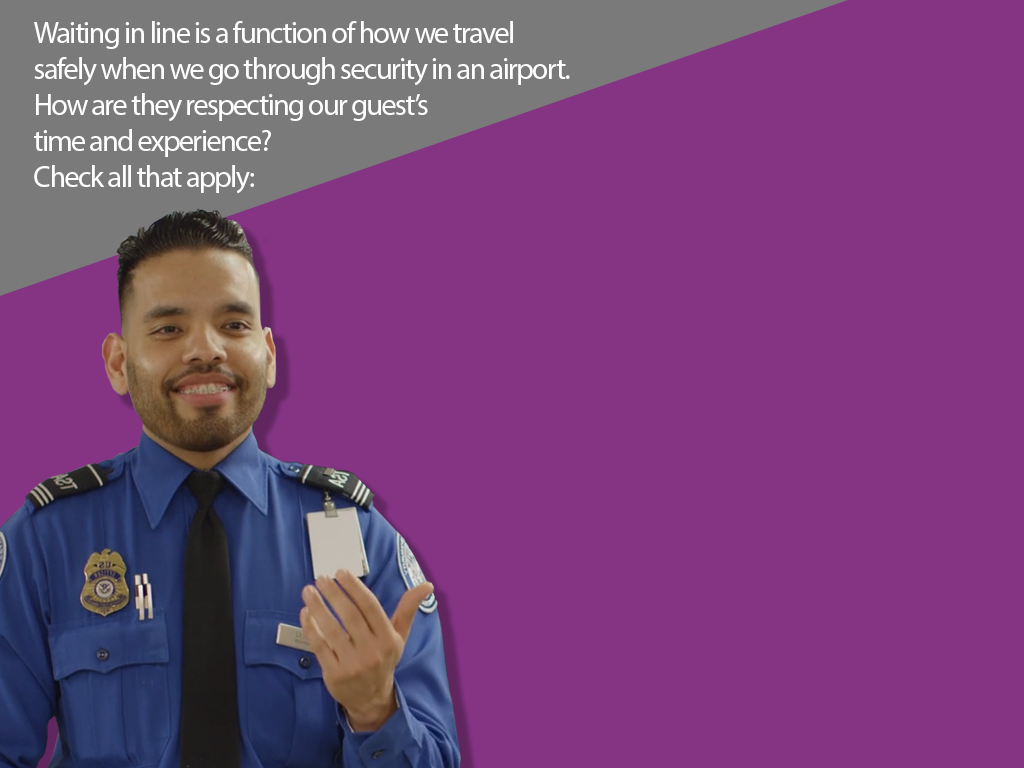
<style>
.page{position:relative;width:1024px;height:768px;background:#853484}
.page>*{position:absolute;margin:0}
.t1{font:30px/36px "MyriadPro-Regular";letter-spacing:-0.05em;color:#ffffff}
</style>
<div class="page">
<p class="t1" style="left:34px;top:21px;width:536px;height:173px">Waiting in line is a function of how we travel <br>safely when we go through security in an airport. <br>How are they respecting our guest’s <br>time and experience?<br>Check all that apply:</p>
</div>
